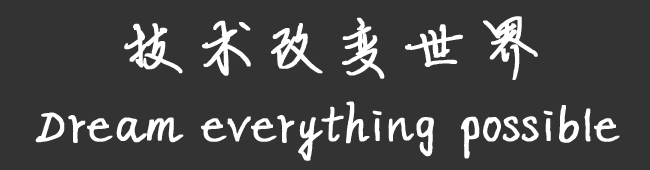
<style>
.page{position:relative;width:650px;height:170px;background:#333333}
.page>*{position:absolute;margin:0}
.t1{font:66.7px "XingShiXin-yinbixingshu";color:#ffffff;text-transform:uppercase;font-weight:bold}
.t2{font:66.7px "XingShiXin-yinbixingshu";color:#ffffff;font-weight:bold}
</style>
<div class="page">
<p class="t1" style="left:124px;top:16px;width:414px;height:64px">技术改变世界</p>
<p class="t2" style="left:35px;top:101px;width:585px;height:60px">Dream everything possible</p>
</div>
